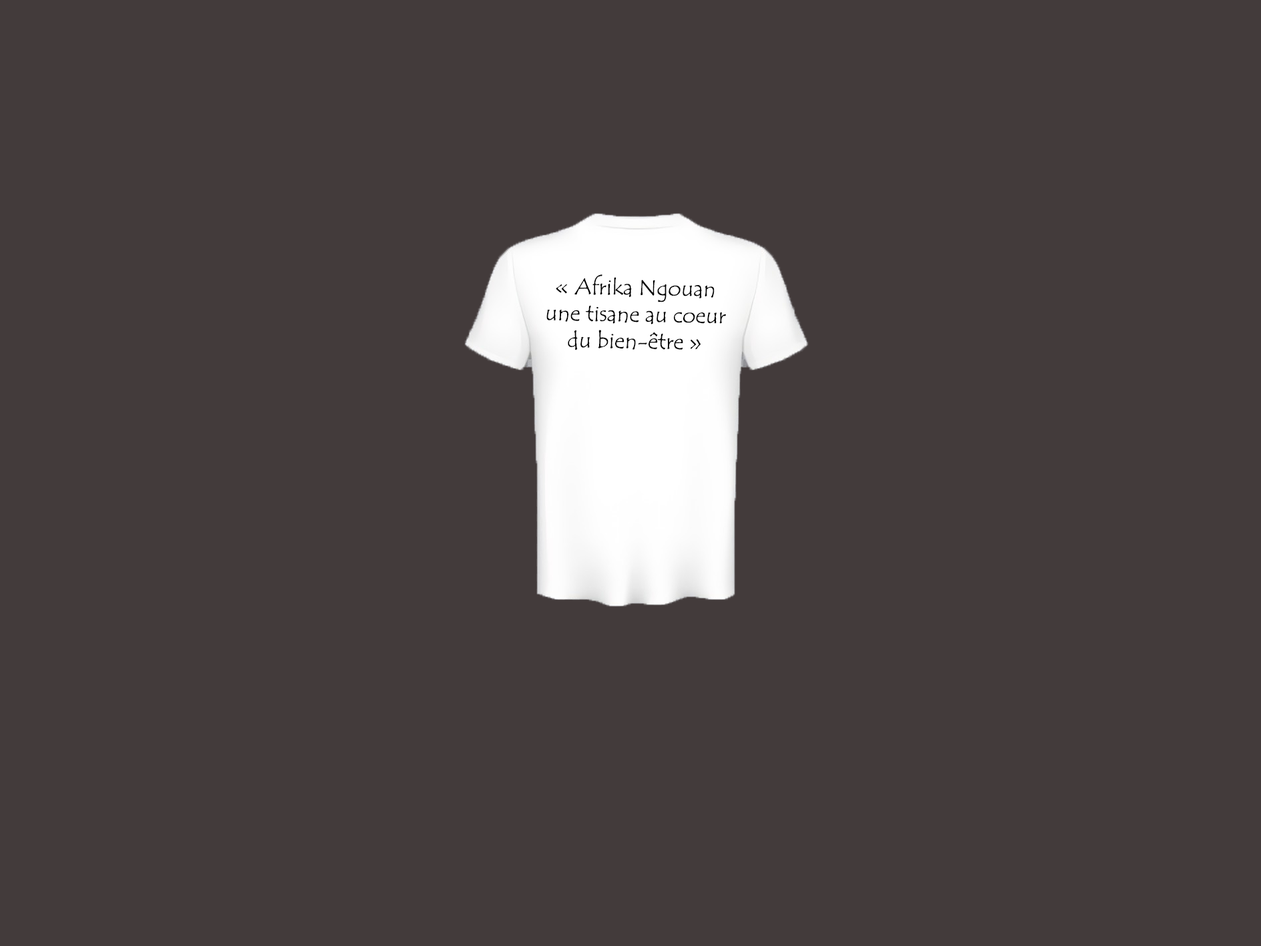
<style>
.page{position:relative;width:1261px;height:946px;background:#433b3b}
.page>*{position:absolute;margin:0}
.t1{font:22.2px "TempusSansITC";color:#010101}
</style>
<div class="page">
<p class="t1" style="left:546px;top:274px;width:180px;height:76px;text-align:center;rotate:1deg">« Afrika Ngouan<br>une tisane au coeur <br>du bien-être »</p>
</div>
